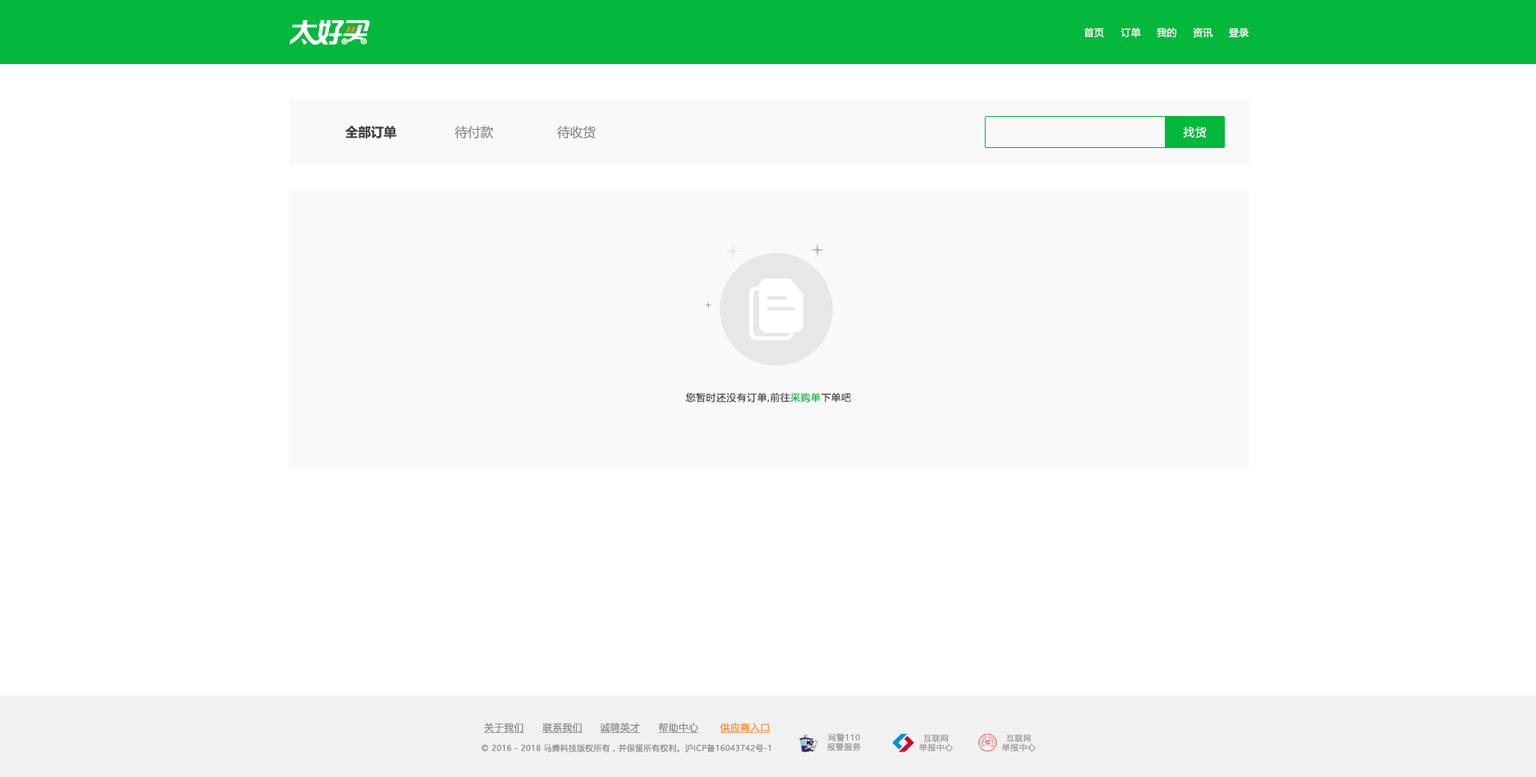
<style>
.page{position:relative;width:1536px;height:777px;background:#ffffff}
.page>*{position:absolute;margin:0}
.t1{font:9.6px "MicrosoftYaHeiUI";letter-spacing:0.04em;color:#ffffff}
.t2{font:12.8px "MicrosoftYaHeiUI-Bold";color:#444444}
.t3{font:12.8px "MicrosoftYaHeiUI";color:#8c8c8c}
.t4{font:11.2px "MicrosoftYaHeiUI";letter-spacing:0.06em;color:#f7f7f7}
.t5{font:9.6px "MicrosoftYaHeiUI";letter-spacing:0.06em;color:#444444}
.t6{font:9.6px "MicrosoftYaHeiUI";letter-spacing:0.06em;color:#04b83b}
.t7{font:9.6px "MicrosoftYaHeiUI";letter-spacing:0.04em;color:#8c8c8c;text-decoration:underline}
.t8{font:9.6px "MicrosoftYaHeiUI";letter-spacing:0.04em;color:#ff8b25;text-decoration:underline}
.t9{font:8px/9.3px "MicrosoftYaHei";letter-spacing:0.06em;color:#999999}
.t10{font:8px "MicrosoftYaHeiUI";letter-spacing:0.04em;color:#8c8c8c}
</style>
<div class="page">
<p class="t1" style="left:1084px;top:27px;width:20px;height:11px">首页</p>
<p class="t1" style="left:1120px;top:27px;width:20px;height:11px">订单</p>
<p class="t1" style="left:1156px;top:27px;width:20px;height:11px">我的</p>
<p class="t1" style="left:1192px;top:27px;width:20px;height:11px">资讯</p>
<p class="t1" style="left:1228px;top:28px;width:20px;height:10px">登录</p>
<p class="t2" style="left:345px;top:126px;width:52px;height:12px">全部订单</p>
<p class="t3" style="left:454px;top:126px;width:39px;height:12px">待付款</p>
<p class="t3" style="left:557px;top:126px;width:39px;height:12px">待收货</p>
<p class="t4" style="left:1183px;top:126px;width:23px;height:12px">找货</p>
<p class="t5" style="left:685px;top:392px;width:166px;height:10px">您暂时还没有订单,前往<span class="t6">采购单</span>下单吧</p>
<p class="t7" style="left:484px;top:722px;width:41px;height:11px">关于我们</p>
<p class="t7" style="left:542px;top:722px;width:41px;height:11px">联系我们</p>
<p class="t7" style="left:600px;top:722px;width:41px;height:11px">诚聘英才</p>
<p class="t7" style="left:658px;top:722px;width:41px;height:11px">帮助中心</p>
<p class="t8" style="left:720px;top:722px;width:50px;height:11px">供应商入口</p>
<p class="t9" style="left:827px;top:733px;width:34px;height:18px;text-align:center">网警110<br>报警服务</p>
<p class="t9" style="left:919px;top:733px;width:34px;height:18px;text-align:center">互联网<br>举报中心</p>
<p class="t9" style="left:1001px;top:733px;width:35px;height:18px;text-align:center">互联网<br>举报中心</p>
<p class="t10" style="left:481px;top:743px;width:290px;height:9px">© 2016 - 2018 马蜂科技版权所有，并保留所有权利。沪ICP备16043742号-1</p>
</div>
